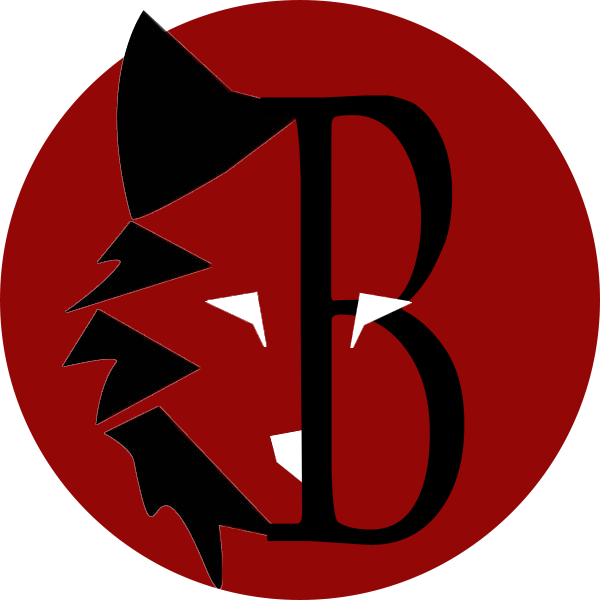
<style>
.page{position:relative;width:600px;height:600px;background:#930707}
.page>*{position:absolute;margin:0}
.t1{font:673.6px "CalifornianFB-Reg";color:#000000;text-transform:uppercase;scale:0.62 1}
</style>
<div class="page">
<p class="t1" style="left:259px;top:95px;width:206px;height:450px">B</p>
</div>
